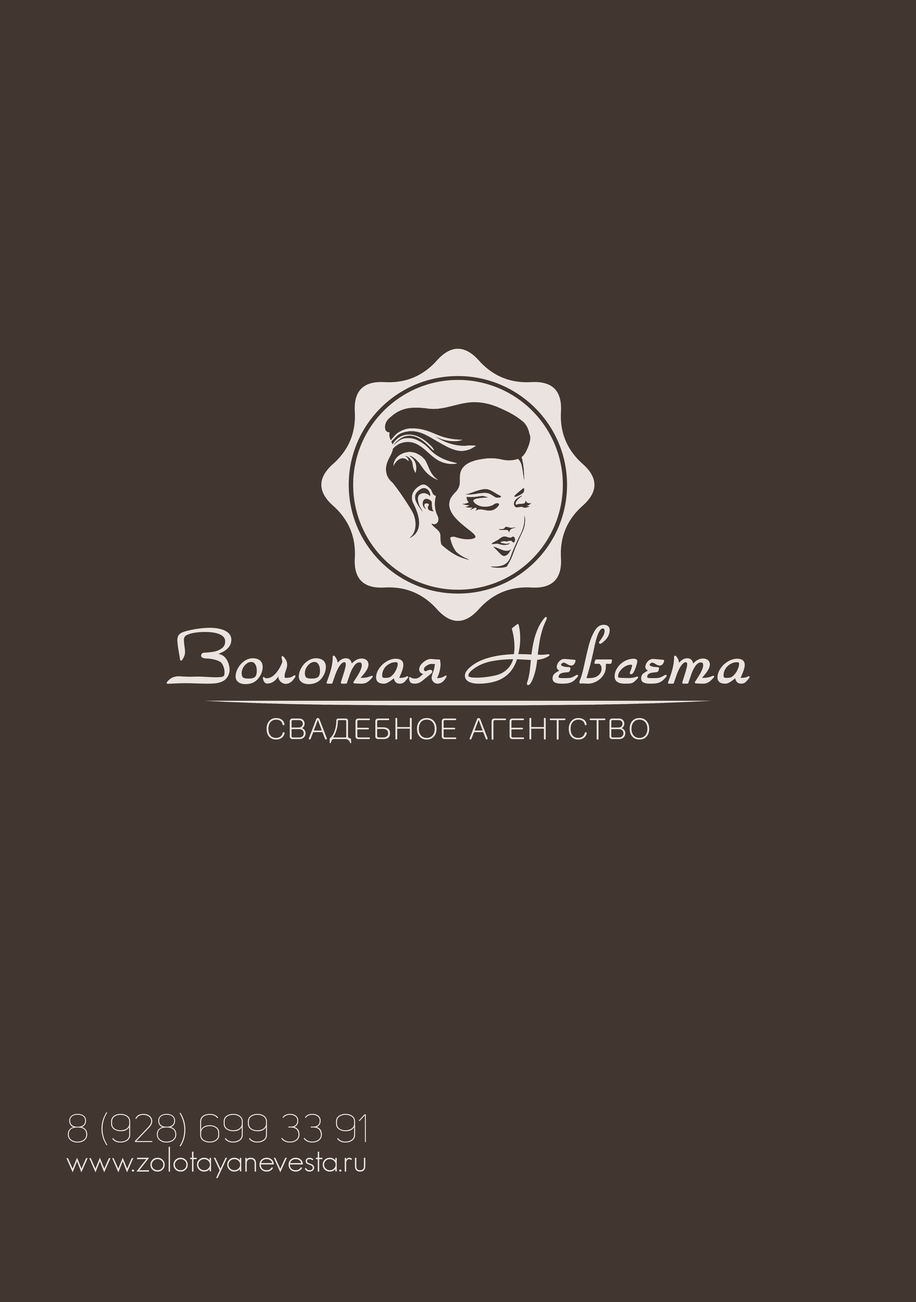
<style>
.page{position:relative;width:916px;height:1302px;background:#413630}
.page>*{position:absolute;margin:0}
.t1{font:80.8px "ParkAvenueNormal";color:#ebe3df}
.t2{font:30px "Gulim";color:#ebe3df}
.t3{font:33.5px/29.5px "GeosansLight";color:#ebe3df}
.t4{font:39.2px/29.5px "UniSansThinCAPS";color:#ebe3df}
</style>
<div class="page">
<p class="t1" style="left:168px;top:617px;width:581px;height:67px">Золотая Невсета</p>
<p class="t2" style="left:266px;top:718px;width:383px;height:25px">СВАДЕБНОЕ АГЕНТСТВО</p>
<p class="t3" style="left:66px;top:1112px;width:300px;height:66px"><span class="t4">8 (928) 699 33 91<br></span>www.zolotayanevesta.ru</p>
</div>
